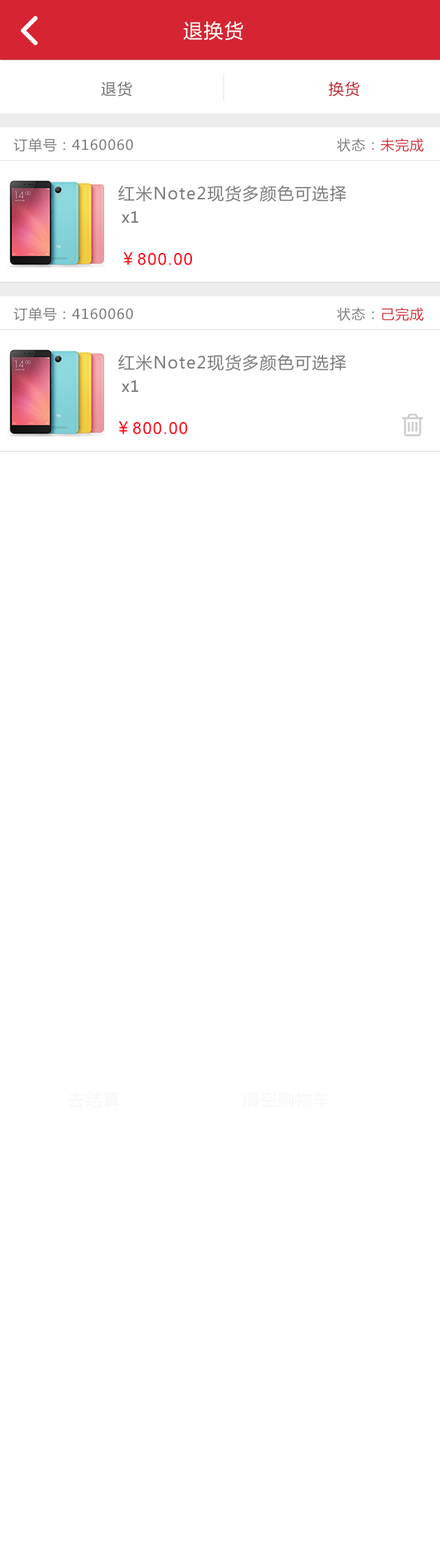
<style>
.page{position:relative;width:440px;height:1568px;background:#ffffff}
.page>*{position:absolute;margin:0}
.t1{font:19.2px "MicrosoftYaHei";letter-spacing:0.06em;color:#ffffff}
.t2{font:15.1px "MicrosoftYaHei";letter-spacing:0.06em;color:#707171}
.t3{font:15.1px "MicrosoftYaHei";letter-spacing:0.06em;color:#ba1f2c}
.t4{font:13.7px "MicrosoftYaHei";letter-spacing:0.06em;color:#7a7a7a}
.t5{font:13.7px "MicrosoftYaHei";letter-spacing:0.06em;color:#d62432}
.t6{font:16.5px "MicrosoftYaHei";letter-spacing:0.06em;color:#7a7a7a}
.t7{font:15.1px "MicrosoftYaHei";letter-spacing:0.06em;color:#7a7a7a}
.t8{font:16.5px "ArialMT";letter-spacing:0.06em;color:#ff0014}
.t9{font:16.5px "MicrosoftYaHei";letter-spacing:0.06em;color:#ff0014}
.t10{font:16.5px "MicrosoftYaHei";letter-spacing:0.06em;color:#f7f7f7}
</style>
<div class="page">
<p class="t1" style="left:184px;top:21px;width:59px;height:20px">退换货</p>
<p class="t2" style="left:101px;top:81px;width:31px;height:15px">退货</p>
<p class="t3" style="left:329px;top:81px;width:31px;height:15px">换货</p>
<p class="t4" style="left:14px;top:138px;width:119px;height:14px">订单号：4160060</p>
<p class="t4" style="left:337px;top:138px;width:86px;height:14px">状态：<span class="t5">未完成</span></p>
<p class="t6" style="left:118px;top:185px;width:228px;height:17px">红米Note2现货多颜色可选择</p>
<p class="t7" style="left:122px;top:211px;width:16px;height:12px">x1</p>
<p class="t8" style="left:123px;top:252px;width:69px;height:13px"><span class="t9">￥</span>800.00</p>
<p class="t4" style="left:14px;top:307px;width:119px;height:14px">订单号：4160060</p>
<p class="t4" style="left:337px;top:307px;width:86px;height:14px">状态：<span class="t5">己完成</span></p>
<p class="t6" style="left:118px;top:354px;width:228px;height:17px">红米Note2现货多颜色可选择</p>
<p class="t7" style="left:122px;top:380px;width:16px;height:12px">x1</p>
<p class="t8" style="left:118px;top:421px;width:70px;height:13px"><span class="t9">￥</span>800.00</p>
<p class="t10" style="left:68px;top:1091px;width:52px;height:17px">去结算</p>
<p class="t10" style="left:243px;top:1091px;width:86px;height:17px">清空购物车</p>
</div>
